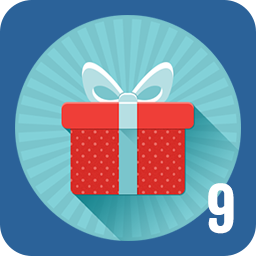
<style>
.page{position:relative;width:256px;height:256px;background:#2b6299}
.page>*{position:absolute;margin:0}
.t1{font:56.9px "FjallaOne-Regular";letter-spacing:-0.03em;color:#ffffff;text-transform:uppercase;font-weight:bold}
</style>
<div class="page">
<p class="t1" style="left:208px;top:183px;width:26px;height:51px">9</p>
</div>
